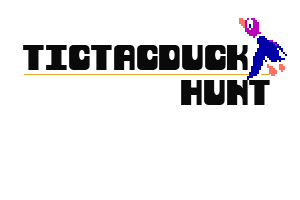
<style>
.page{position:relative;width:300px;height:200px;background:#ffffff}
.page>*{position:absolute;margin:0}
.t1{font:36px "DuckHunt";color:#0a0a0a}
</style>
<div class="page">
<p class="t1" style="left:23px;top:45px;width:225px;height:25px">TICTACDUCK</p>
<p class="t1" style="left:181px;top:80px;width:89px;height:25px">HUNT</p>
</div>
